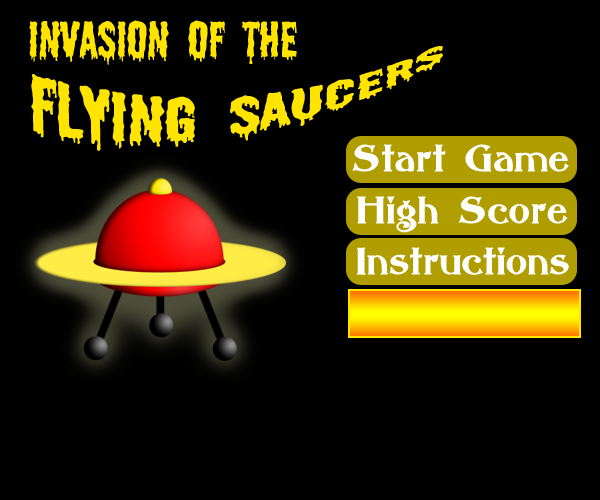
<style>
.page{position:relative;width:600px;height:500px;background:#000000}
.page>*{position:absolute;margin:0}
.t1{font:48px "Shlop";color:#ffe400}
.t2{font:36px "Abbess";color:#ffffff;font-weight:bold}
</style>
<div class="page">
<p class="t1" style="left:29px;top:20px;width:268px;height:45px">Invasion of the</p>
<p class="t2" style="left:352px;top:144px;width:217px;height:28px">Start Game</p>
<p class="t2" style="left:357px;top:196px;width:211px;height:37px">High Score</p>
<p class="t2" style="left:356px;top:247px;width:213px;height:28px">Instructions</p>
</div>
